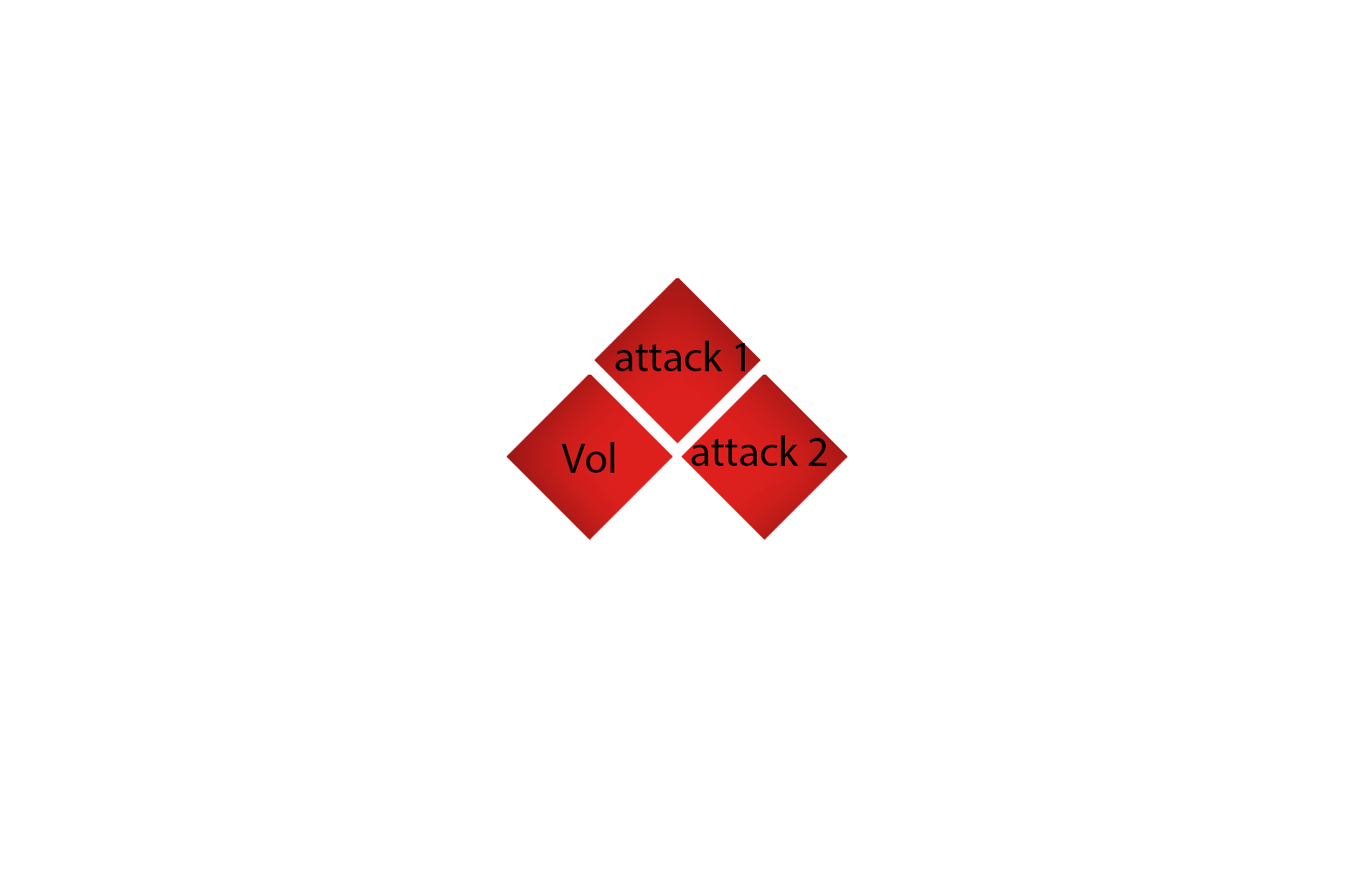
<style>
.page{position:relative;width:1365px;height:874px;background:#ffffff}
.page>*{position:absolute;margin:0}
.t1{font:42.7px "MyriadPro-Regular";color:#000000}
</style>
<div class="page">
<p class="t1" style="left:615px;top:340px;width:130px;height:31px">attack 1</p>
<p class="t1" style="left:691px;top:435px;width:136px;height:31px">attack 2</p>
<p class="t1" style="left:561px;top:442px;width:53px;height:31px">Vol</p>
</div>
